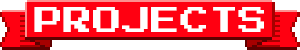
<style>
.page{position:relative;width:300px;height:50px;background:#ff0011}
.page>*{position:absolute;margin:0}
.t1{font:29.2px "PressStart2P-Regular";color:#ffffff}
</style>
<div class="page">
<p class="t1" style="left:34px;top:7px;width:230px;height:25px">PROJECTS</p>
</div>
